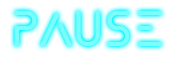
<style>
.page{position:relative;width:172px;height:62px;background:#ffffff}
.page>*{position:absolute;margin:0}
.t1{font:48px "ZELDA";color:#7afefc}
</style>
<div class="page">
<p class="t1" style="left:14px;top:11px;width:148px;height:35px">Pause</p>
</div>
